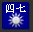
<style>
.page{position:relative;width:33px;height:32px;background:#000090}
.page>*{position:absolute;margin:0}
.t1{font:10.4px "SimSun";color:#ffffff}
</style>
<div class="page">
<p class="t1" style="left:6px;top:4px;width:20px;height:9px">四七</p>
</div>
